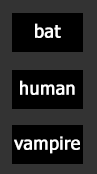
<style>
.page{position:relative;width:97px;height:174px;background:#333333}
.page>*{position:absolute;margin:0}
.t1{font:18px "Tahoma";color:#ffffff;font-weight:bold}
</style>
<div class="page">
<p class="t1" style="left:35px;top:23px;width:26px;height:15px">bat</p>
<p class="t1" style="left:20px;top:80px;width:55px;height:15px">human</p>
<p class="t1" style="left:14px;top:136px;width:66px;height:18px">vampire</p>
</div>
